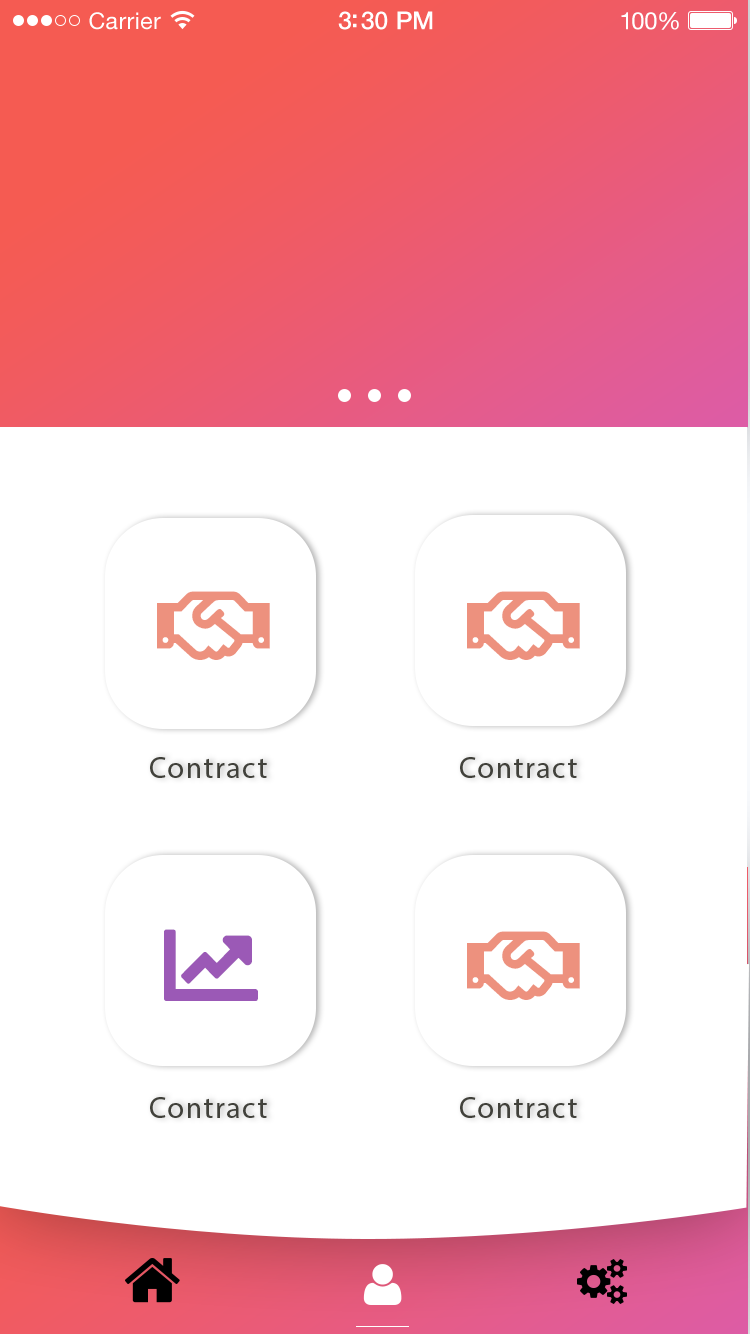
<style>
.page{position:relative;width:750px;height:1334px;background:#ffffff}
.page>*{position:absolute;margin:0}
.t1{font:23px "HelveticaNeue";letter-spacing:0.02em;color:#ffffff}
.t2{font:25px "HelveticaNeue-Medium";letter-spacing:-0.02em;color:#ffffff}
.t3{font:24px "HelveticaNeue";letter-spacing:-0.02em;color:#ffffff}
.t4{font:30px "MyriadPro-Regular";letter-spacing:0.05em;color:#41413b}
</style>
<div class="page">
<p class="t1" style="left:89px;top:12px;width:72px;height:18px">Carrier</p>
<p class="t2" style="left:338px;top:11px;width:95px;height:19px">3:30 PM</p>
<p class="t3" style="left:621px;top:12px;width:58px;height:18px">100%</p>
<p class="t4" style="left:150px;top:757px;width:117px;height:21px">Contract</p>
<p class="t4" style="left:460px;top:757px;width:117px;height:21px">Contract</p>
<p class="t4" style="left:150px;top:1097px;width:117px;height:21px">Contract</p>
<p class="t4" style="left:460px;top:1097px;width:117px;height:21px">Contract</p>
</div>
